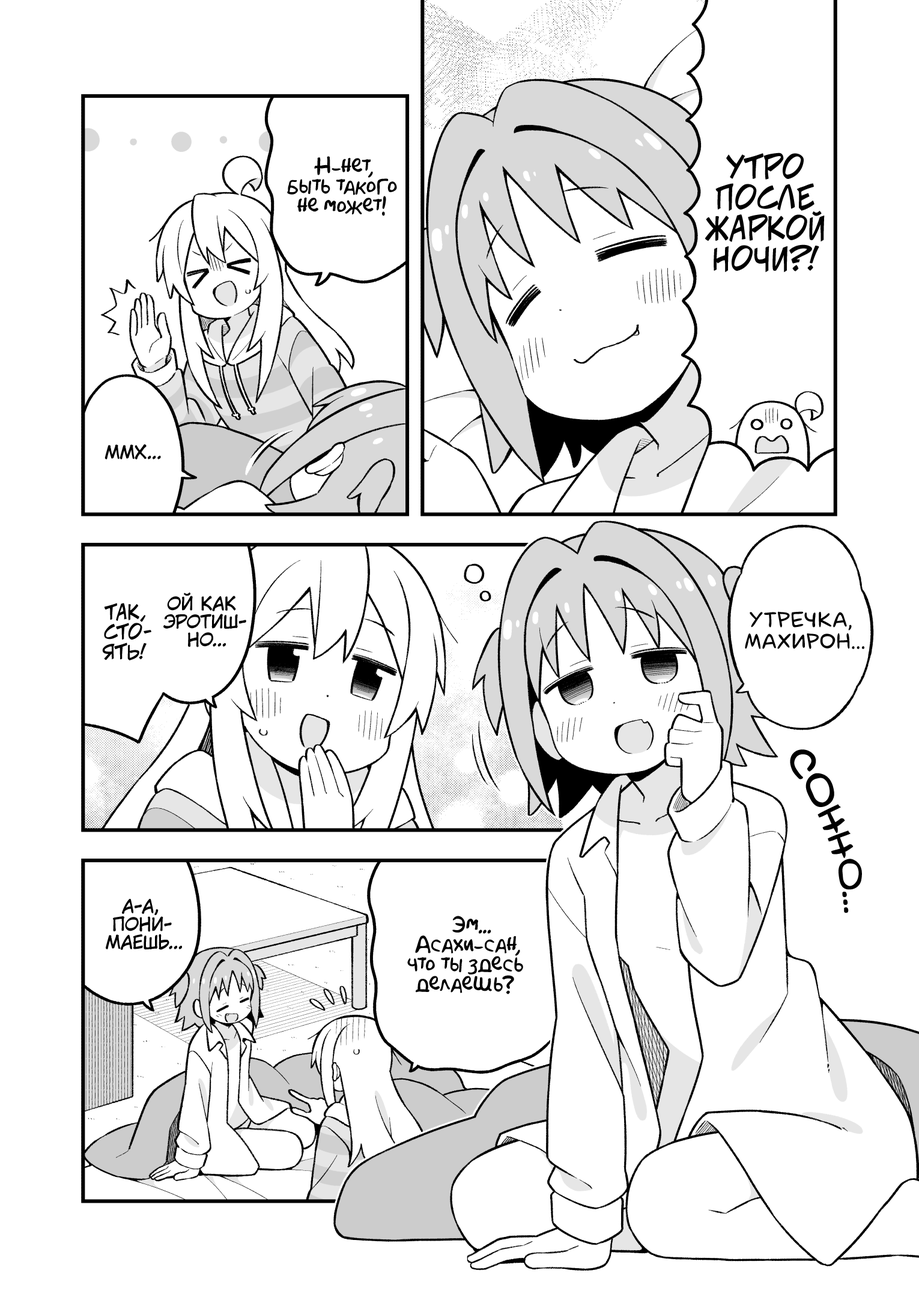
<style>
.page{position:relative;width:919px;height:1297px;background:#ffffff}
.page>*{position:absolute;margin:0}
.t1{font:19.8px "AkbarPlain";color:#000000}
.t2{font:30.6px "v_CCJeffCampbell";color:#000000;text-transform:uppercase}
.t3{font:18px "KuraiVoice2";color:#000000;text-transform:uppercase}
.t4{font:19.8px "v_CCJeffCampbell";color:#000000;text-transform:uppercase}
.t5{font:21.6px "laCartoonerie";color:#000000;text-transform:uppercase}
.t6{font:41.4px "v_Augie";color:#000000}
.t7{font:50.5px "v_Augie";color:#000000}
.t8{font:48.7px "v_Augie";color:#000000}
.t9{font:46.9px "v_Augie";color:#000000}
.t10{font:45.1px "v_Augie";color:#000000}
.t11{font:43.2px "v_Augie";color:#000000}
</style>
<div class="page">
<p class="t1" style="left:287px;top:156px;width:110px;height:60px;text-align:center">Н-нет,<br>быть такого<br>не может!</p>
<p class="t2" style="left:705px;top:153px;width:120px;height:120px;text-align:center">Утро<br>после<br>жаркой<br>ночи?!</p>
<p class="t3" style="left:105px;top:445px;width:56px;height:15px">Ммх...</p>
<p class="t3" style="left:163px;top:592px;width:83px;height:56px;text-align:center">Ой как<br>эротиш-<br>но...</p>
<p class="t4" style="left:102px;top:603px;width:49px;height:58px;text-align:center">Так,<br>сто-<br>ять!</p>
<p class="t5" style="left:745px;top:611px;width:119px;height:38px;text-align:center">Утречка,<br>Махирон...</p>
<p class="t6" style="left:790px;top:750px;width:72px;height:164px;rotate:69deg"><span class="t7">с</span><span class="t8">о</span><span class="t9">н</span><span class="t10">н</span><span class="t11">о</span>...</p>
<p class="t3" style="left:106px;top:899px;width:76px;height:51px;text-align:center">А-а,<br>пони-<br>маешь...</p>
<p class="t1" style="left:407px;top:916px;width:116px;height:79px;text-align:center">Эм...<br>Асахи-сан,<br>что ты здесь<br>делаешь?</p>
</div>
